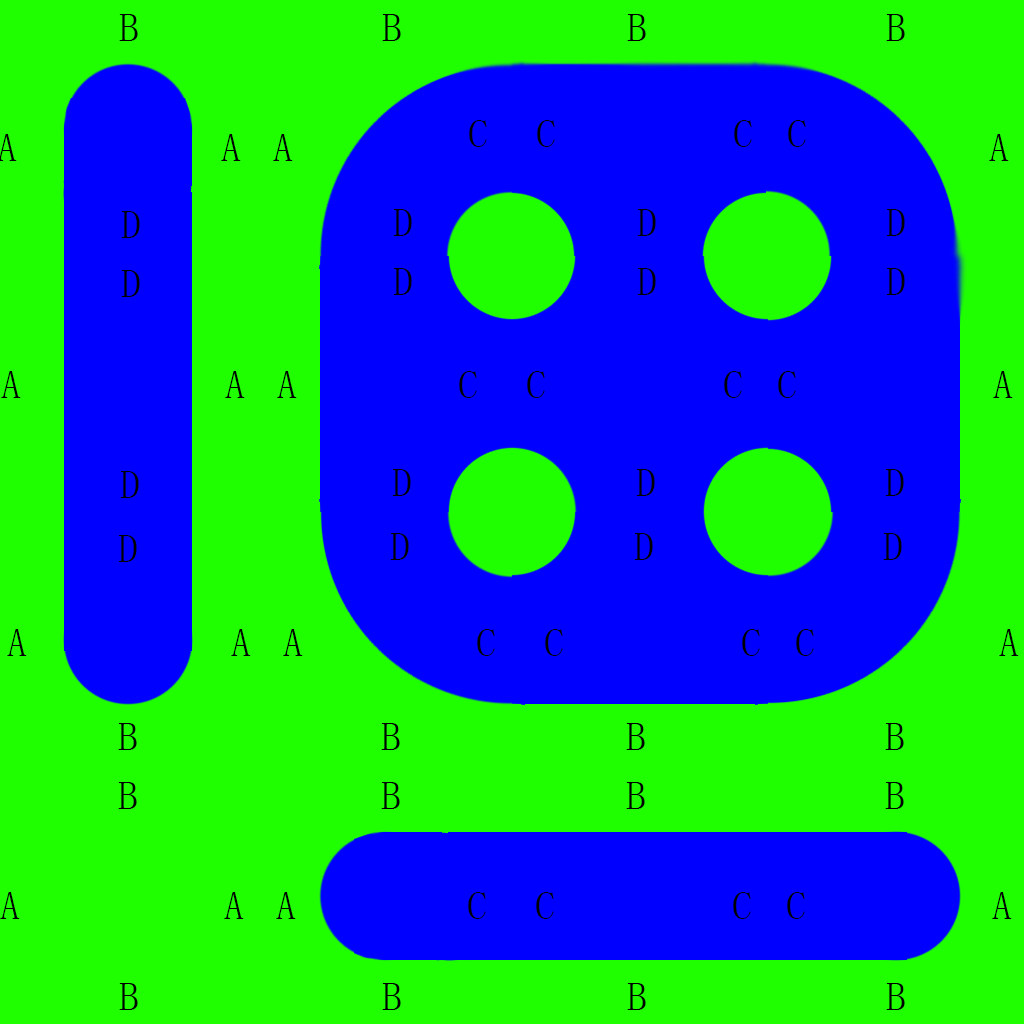
<style>
.page{position:relative;width:1024px;height:1024px;background:#20ff00}
.page>*{position:absolute;margin:0}
.t1{font:40px "SimSun";color:#000000}
</style>
<div class="page">
<p class="t1" style="left:119px;top:14px;width:19px;height:27px">B</p>
<p class="t1" style="left:382px;top:14px;width:19px;height:27px">B</p>
<p class="t1" style="left:627px;top:14px;width:19px;height:27px">B</p>
<p class="t1" style="left:886px;top:14px;width:19px;height:27px">B</p>
<p class="t1" style="left:469px;top:120px;width:18px;height:27px">C</p>
<p class="t1" style="left:537px;top:120px;width:18px;height:27px">C</p>
<p class="t1" style="left:734px;top:120px;width:18px;height:27px">C</p>
<p class="t1" style="left:788px;top:120px;width:18px;height:27px">C</p>
<p class="t1" style="left:221px;top:134px;width:20px;height:27px">A</p>
<p class="t1" style="left:273px;top:134px;width:20px;height:27px">A</p>
<p class="t1" style="left:989px;top:134px;width:20px;height:27px">A</p>
<p class="t1" style="left:393px;top:209px;width:19px;height:27px">D</p>
<p class="t1" style="left:637px;top:209px;width:19px;height:27px">D</p>
<p class="t1" style="left:886px;top:209px;width:19px;height:27px">D</p>
<p class="t1" style="left:121px;top:211px;width:19px;height:27px">D</p>
<p class="t1" style="left:121px;top:270px;width:19px;height:27px">D</p>
<p class="t1" style="left:393px;top:268px;width:19px;height:27px">D</p>
<p class="t1" style="left:637px;top:268px;width:19px;height:27px">D</p>
<p class="t1" style="left:886px;top:268px;width:19px;height:27px">D</p>
<p class="t1" style="left:1px;top:371px;width:20px;height:27px">A</p>
<p class="t1" style="left:225px;top:371px;width:20px;height:27px">A</p>
<p class="t1" style="left:277px;top:371px;width:20px;height:27px">A</p>
<p class="t1" style="left:459px;top:371px;width:18px;height:27px">C</p>
<p class="t1" style="left:527px;top:371px;width:18px;height:27px">C</p>
<p class="t1" style="left:724px;top:371px;width:18px;height:27px">C</p>
<p class="t1" style="left:778px;top:371px;width:18px;height:27px">C</p>
<p class="t1" style="left:993px;top:371px;width:20px;height:27px">A</p>
<p class="t1" style="left:120px;top:471px;width:19px;height:27px">D</p>
<p class="t1" style="left:392px;top:469px;width:19px;height:27px">D</p>
<p class="t1" style="left:636px;top:469px;width:19px;height:27px">D</p>
<p class="t1" style="left:885px;top:469px;width:19px;height:27px">D</p>
<p class="t1" style="left:390px;top:533px;width:19px;height:27px">D</p>
<p class="t1" style="left:634px;top:533px;width:19px;height:27px">D</p>
<p class="t1" style="left:883px;top:533px;width:19px;height:27px">D</p>
<p class="t1" style="left:118px;top:535px;width:19px;height:27px">D</p>
<p class="t1" style="left:7px;top:629px;width:20px;height:27px">A</p>
<p class="t1" style="left:231px;top:629px;width:20px;height:27px">A</p>
<p class="t1" style="left:283px;top:629px;width:20px;height:27px">A</p>
<p class="t1" style="left:477px;top:629px;width:18px;height:27px">C</p>
<p class="t1" style="left:545px;top:629px;width:18px;height:27px">C</p>
<p class="t1" style="left:742px;top:629px;width:18px;height:27px">C</p>
<p class="t1" style="left:796px;top:629px;width:18px;height:27px">C</p>
<p class="t1" style="left:999px;top:629px;width:20px;height:27px">A</p>
<p class="t1" style="left:118px;top:723px;width:19px;height:27px">B</p>
<p class="t1" style="left:381px;top:723px;width:19px;height:27px">B</p>
<p class="t1" style="left:626px;top:723px;width:19px;height:27px">B</p>
<p class="t1" style="left:885px;top:723px;width:19px;height:27px">B</p>
<p class="t1" style="left:118px;top:782px;width:19px;height:27px">B</p>
<p class="t1" style="left:381px;top:782px;width:19px;height:27px">B</p>
<p class="t1" style="left:626px;top:782px;width:19px;height:27px">B</p>
<p class="t1" style="left:885px;top:782px;width:19px;height:27px">B</p>
<p class="t1" style="left:0px;top:892px;width:20px;height:27px">A</p>
<p class="t1" style="left:224px;top:892px;width:20px;height:27px">A</p>
<p class="t1" style="left:276px;top:892px;width:20px;height:27px">A</p>
<p class="t1" style="left:468px;top:892px;width:18px;height:27px">C</p>
<p class="t1" style="left:536px;top:892px;width:18px;height:27px">C</p>
<p class="t1" style="left:733px;top:892px;width:18px;height:27px">C</p>
<p class="t1" style="left:787px;top:892px;width:18px;height:27px">C</p>
<p class="t1" style="left:992px;top:892px;width:20px;height:27px">A</p>
<p class="t1" style="left:119px;top:983px;width:19px;height:27px">B</p>
<p class="t1" style="left:382px;top:983px;width:19px;height:27px">B</p>
<p class="t1" style="left:627px;top:983px;width:19px;height:27px">B</p>
<p class="t1" style="left:886px;top:983px;width:19px;height:27px">B</p>
</div>
